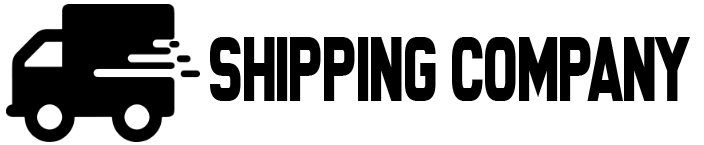
<style>
.page{position:relative;width:704px;height:145px;background:#ffffff}
.page>*{position:absolute;margin:0}
.t1{font:87.4px "Achtung!Polizei";color:#000000;scale:0.59 1}
</style>
<div class="page">
<p class="t1" style="left:210px;top:37px;width:480px;height:64px">shipping company</p>
</div>
